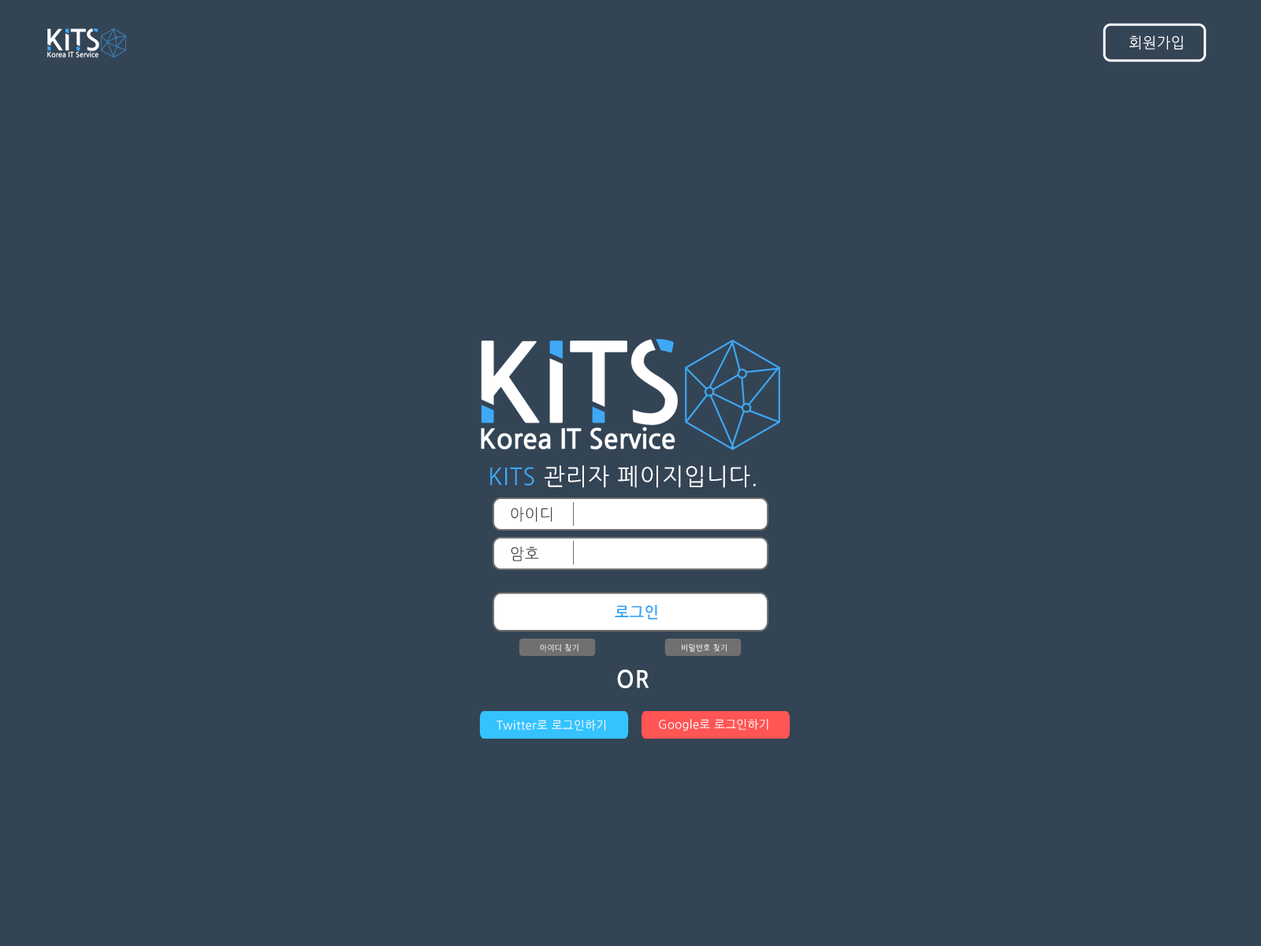
<style>
.page{position:relative;width:1261px;height:946px;background:#334455}
.page>*{position:absolute;margin:0}
.t1{font:15px "NanumGothic";letter-spacing:0.04em;color:#ffffff;scale:0.96 1}
.t2{font:23.6px "NanumGothic";letter-spacing:0.04em;color:#ffffff;scale:0.96 1}
.t3{font:23.6px "NanumGothic";letter-spacing:0.04em;color:#3fa9f5;scale:0.96 1}
.t4{font:15.8px "NanumGothic";letter-spacing:0.04em;color:#444444;scale:0.96 1}
.t5{font:15.8px "NanumGothicBold";letter-spacing:0.04em;color:#3fa9f5;scale:0.96 1}
.t6{font:7.9px "NanumGothic";letter-spacing:0.04em;scale:0.96 1}
.t7{font:7.9px "NanumGothic";letter-spacing:0.04em;color:#ffffff;scale:0.96 1}
.t8{font:23.6px "NanumGothicBold";letter-spacing:0.04em;color:#ffffff;scale:0.96 1}
.t9{font:11.8px "NanumGothic";letter-spacing:0.04em;color:#ffffff;scale:0.96 1}
</style>
<div class="page">
<p class="t1" style="left:1129px;top:35px;width:54px;height:15px">회원가입</p>
<p class="t2" style="left:490px;top:465px;width:266px;height:23px"><span class="t3">KITS </span>관리자 페이지입니다.</p>
<p class="t4" style="left:511px;top:507px;width:41px;height:15px">아이디</p>
<p class="t4" style="left:511px;top:546px;width:28px;height:15px">암호</p>
<p class="t5" style="left:615px;top:604px;width:42px;height:15px">로그인</p>
<p class="t6" style="left:540px;top:644px;width:38px;height:8px">아이디 찾기</p>
<p class="t7" style="left:682px;top:644px;width:45px;height:8px">비밀번호 찾기</p>
<p class="t8" style="left:617px;top:669px;width:32px;height:19px">OR</p>
<p class="t9" style="left:496px;top:720px;width:109px;height:11px">Twitter로 로그인하기</p>
<p class="t9" style="left:659px;top:719px;width:109px;height:12px">Google로 로그인하기</p>
</div>
